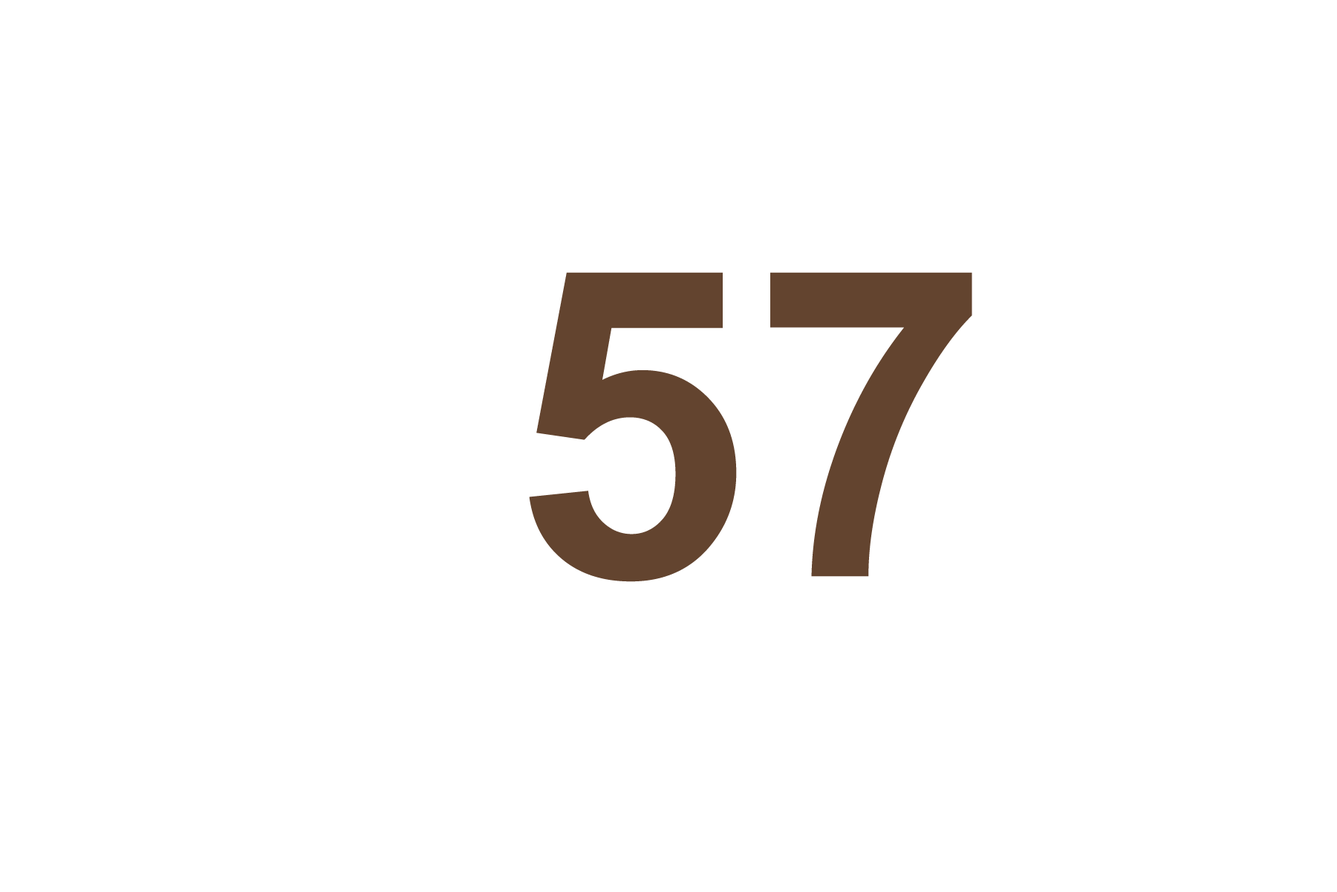
<style>
.page{position:relative;width:1337px;height:892px;background:#ffffff}
.page>*{position:absolute;margin:0}
.t1{font:429.6px "Arial-BoldMT";color:#63442f}
</style>
<div class="page">
<p class="t1" style="left:529px;top:272px;width:444px;height:310px">57</p>
</div>
